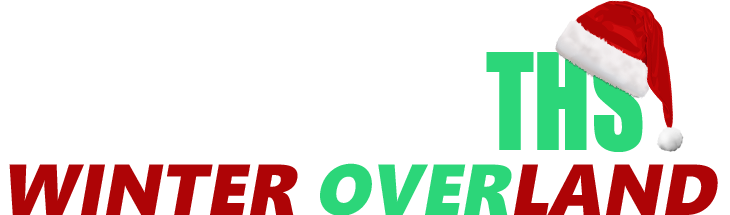
<style>
.page{position:relative;width:730px;height:215px;background:#ffffff}
.page>*{position:absolute;margin:0}
.t1{font:72px "SegoeUIBlack";color:#ae0406;font-style:italic}
.t2{font:72px "SegoeUIBlack";color:#2cd679;font-style:italic}
</style>
<div class="page">
<p class="t1" style="left:9px;top:163px;width:709px;height:53px">WINTER <span class="t2">OVER</span>LAND</p>
</div>
